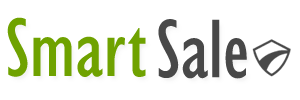
<style>
.page{position:relative;width:300px;height:100px;background:#ffffff}
.page>*{position:absolute;margin:0}
.t1{font:85.8px "GillSansMT-Condensed";color:#6fa200}
.t2{font:85.8px "GillSansMT-Condensed";color:#484848}
</style>
<div class="page">
<p class="t1" style="left:7px;top:17px;width:139px;height:60px">Smart</p>
<p class="t2" style="left:158px;top:19px;width:89px;height:60px">Sale</p>
</div>
